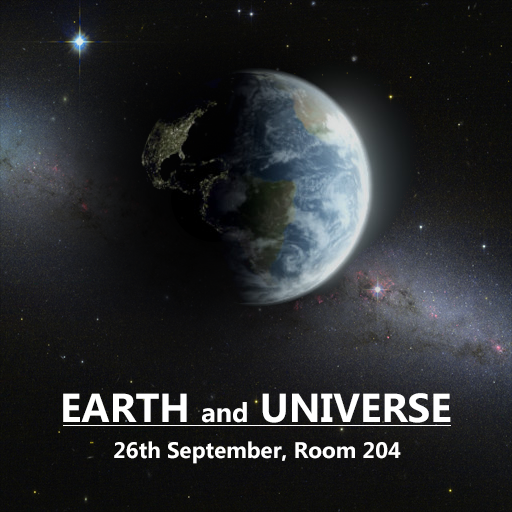
<style>
.page{position:relative;width:512px;height:512px}
.page>*{position:absolute;margin:0}
.t1{font:37.5px "MicrosoftYaHei-Bold";color:#ffffff}
.t2{font:25px "MicrosoftYaHei-Bold";color:#ffffff}
.t3{font:20.8px "MicrosoftYaHei-Bold";color:#ffffff}
</style>
<div class="page">
<p class="t1" style="left:63px;top:393px;width:388px;height:30px">EARTH <span class="t2">and</span> UNIVERSE</p>
<p class="t3" style="left:114px;top:441px;width:287px;height:23px">26th September, Room 204</p>
</div>
